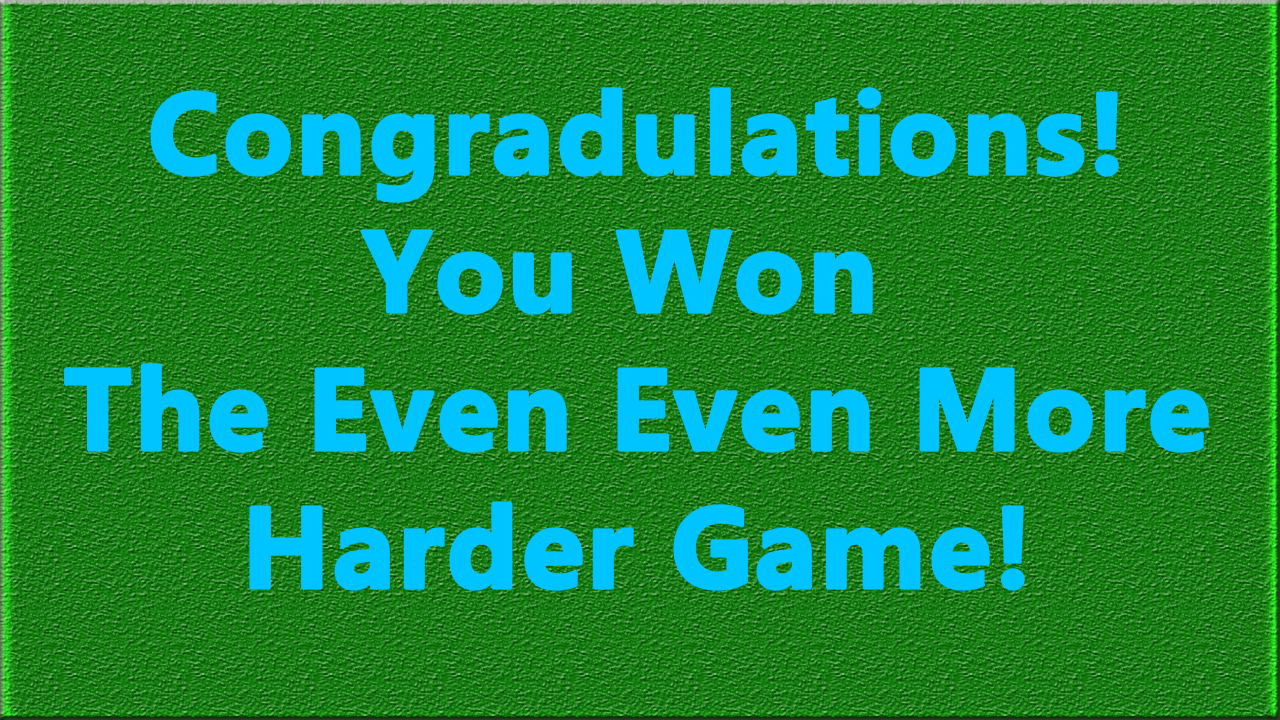
<style>
.page{position:relative;width:1280px;height:720px}
.page>*{position:absolute;margin:0}
.t1{font:115px "Ebrima-Bold";color:#00c4ff;font-weight:bold}
</style>
<div class="page">
<p class="t1" style="left:64px;top:87px;width:1145px;height:504px;text-align:center">Congradulations!<br>You Won <br>The Even Even More<br>Harder Game!</p>
</div>
